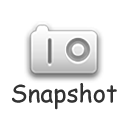
<style>
.page{position:relative;width:128px;height:128px;background:#ffffff}
.page>*{position:absolute;margin:0}
.t1{font:24.9px "ComicSansMS";color:#323232}
</style>
<div class="page">
<p class="t1" style="left:12px;top:83px;width:105px;height:27px">Snapshot</p>
</div>
